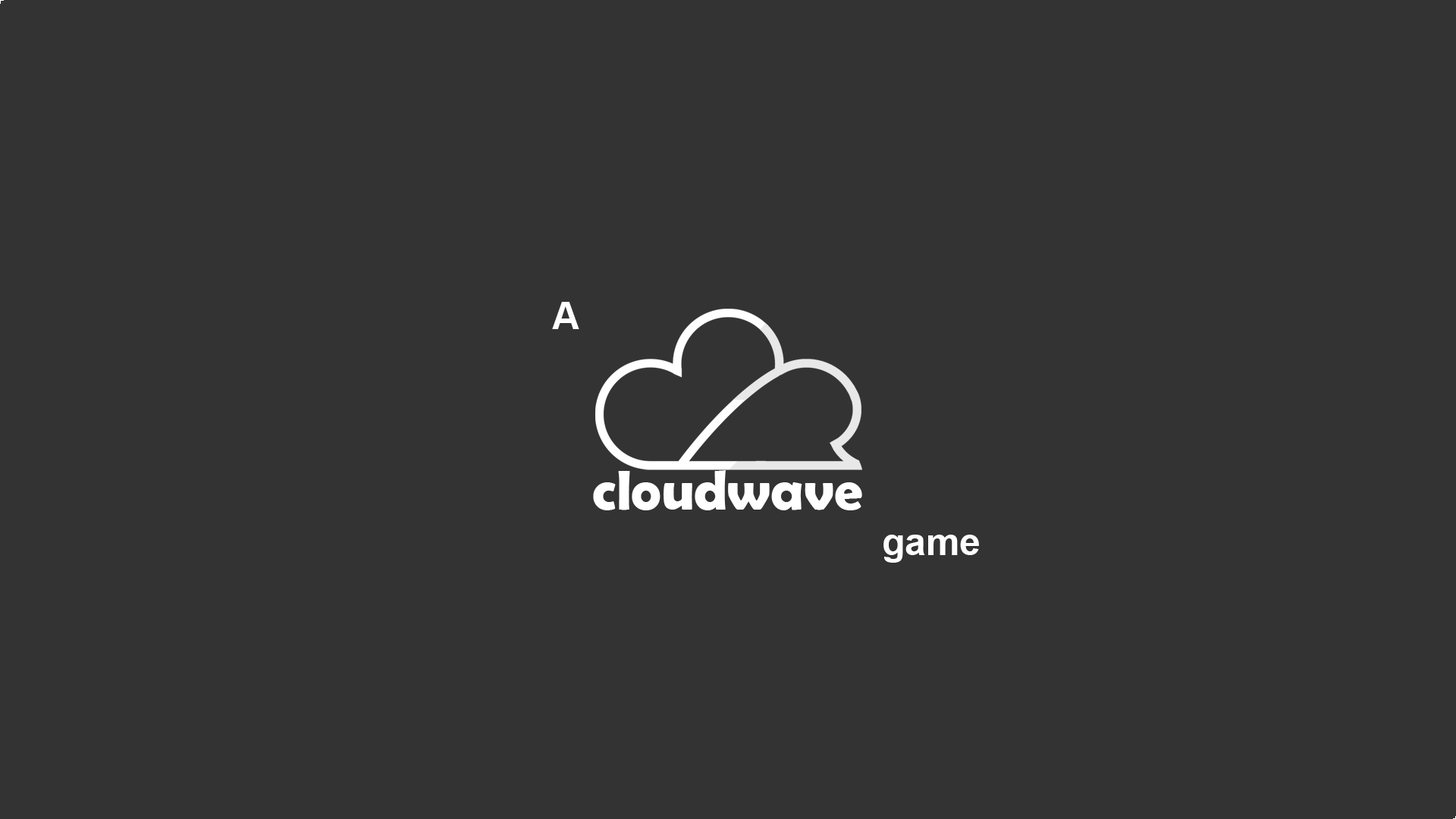
<style>
.page{position:relative;width:1456px;height:819px;background:#333333}
.page>*{position:absolute;margin:0}
.t1{font:37.9px "Arial-BoldMT";color:#ffffff}
.t2{font:56.5px "BerlinSansFBDemi-Bold";color:#ffffff}
</style>
<div class="page">
<p class="t1" style="left:552px;top:302px;width:27px;height:27px">A</p>
<p class="t2" style="left:593px;top:470px;width:269px;height:40px">cloudwave</p>
<p class="t1" style="left:883px;top:535px;width:96px;height:28px">game</p>
</div>
